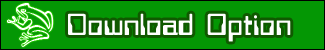
<style>
.page{position:relative;width:325px;height:50px;background:#049704}
.page>*{position:absolute;margin:0}
.t1{font:30px "bitwise";color:#ffffff}
</style>
<div class="page">
<p class="t1" style="left:68px;top:13px;width:223px;height:29px">Download Option</p>
</div>
